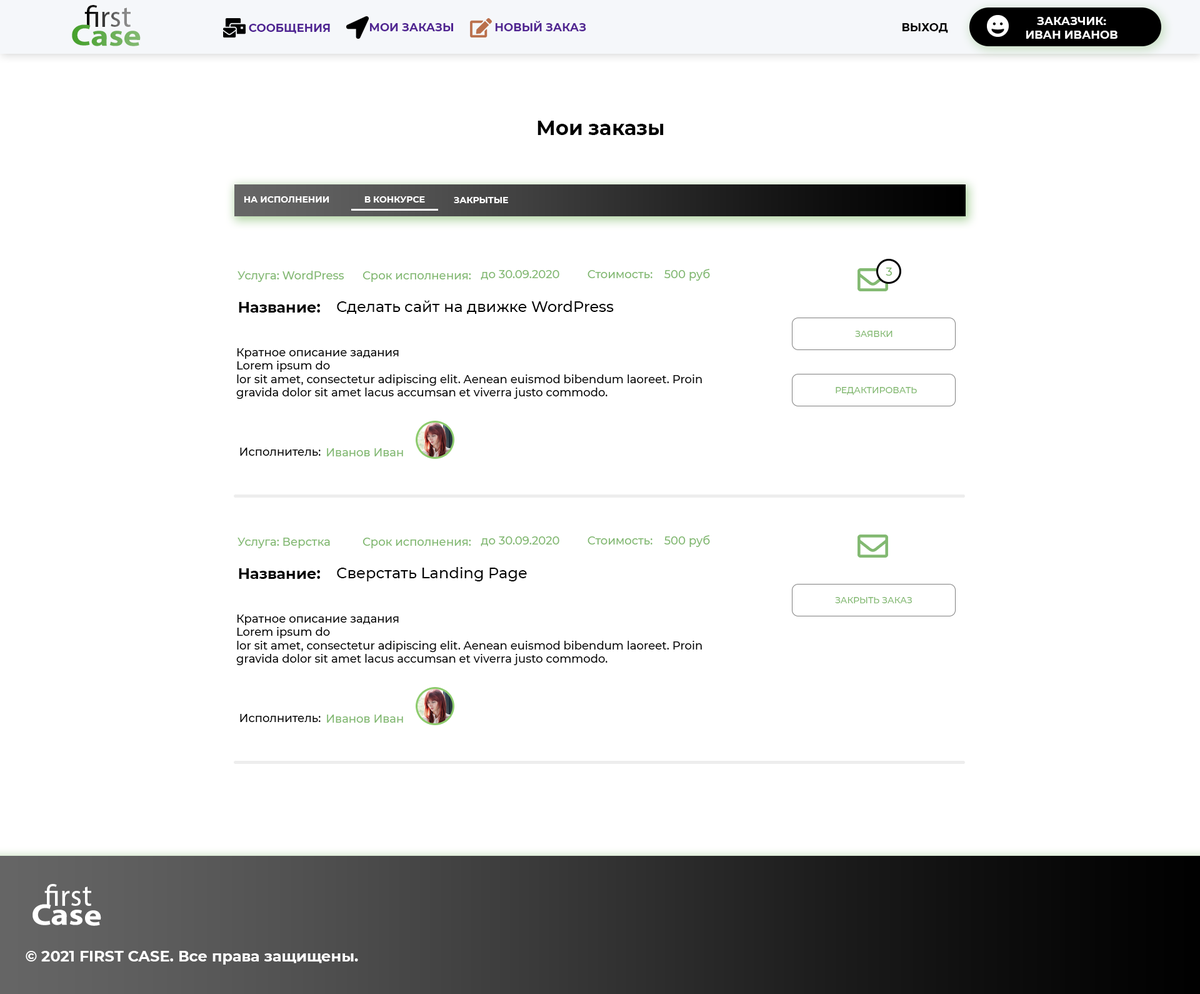
<style>
.page{position:relative;width:1200px;height:994px;background:#ffffff}
.page>*{position:absolute;margin:0}
.t1{font:30px "MyriadPro-Regular"}
.t2{font:11.2px "Montserrat-Bold";color:#ffffff;text-transform:uppercase}
.t3{font:30px "MyriadPro-Bold";scale:1.13 1}
.t4{font:30px "MyriadPro-Regular";scale:1.13 1}
.t5{font:11.2px "Montserrat-Bold";color:#4f2492;text-transform:uppercase}
.t6{font:11.2px "Montserrat-Bold";color:#502492;text-transform:uppercase}
.t7{font:11.2px "Montserrat-Bold";color:#512592;text-transform:uppercase}
.t8{font:11.2px "Montserrat-Bold";color:#000000;text-transform:uppercase}
.t9{font:20px "Montserrat-Bold";color:#000000}
.t10{font:8.7px "Montserrat-Bold";color:#ffffff;text-transform:uppercase}
.t11{font:11.2px "Montserrat-Medium";color:#82b971}
.t12{font:11.2px "Montserrat-Medium";color:#82b970}
.t13{font:15px "Montserrat-Bold";color:#000000}
.t14{font:15px "Montserrat-Medium";color:#000000}
.t15{font:8.7px "Montserrat-Medium";color:#82b970;text-transform:uppercase}
.t16{font:11.2px "Montserrat-Medium";color:#000000}
.t17{font:30px "MyriadPro-Regular";color:#ffffff}
.t18{font:30px "MyriadPro-Bold";color:#ffffff;scale:1.13 1}
.t19{font:30px "MyriadPro-Regular";color:#ffffff;scale:1.13 1}
.t20{font:15px "Montserrat-Bold";color:#ffffff}
</style>
<div class="page">
<p class="t1" style="left:84px;top:5px;width:47px;height:22px">first</p>
<p class="t2" style="left:1026px;top:17px;width:91px;height:22px;text-align:center">заказчик:<br>иВАН иВАНОВ</p>
<p class="t3" style="left:72px;top:24px;width:69px;height:22px;rotate:1deg"><span class="t4">       </span>Case</p>
<p class="t5" style="left:249px;top:24px;width:81px;height:10px">СООБЩЕНИЯ</p>
<p class="t6" style="left:370px;top:23px;width:83px;height:8px">МОИ ЗАКАЗЫ</p>
<p class="t7" style="left:495px;top:21px;width:91px;height:10px">новый заказ</p>
<p class="t8" style="left:902px;top:23px;width:46px;height:10px">ВЫХОД</p>
<p class="t9" style="left:537px;top:121px;width:127px;height:14px">Мои заказы</p>
<p class="t10" style="left:244px;top:196px;width:85px;height:6px">На исполнении</p>
<p class="t10" style="left:364px;top:196px;width:61px;height:6px">В конкурсе</p>
<p class="t10" style="left:454px;top:197px;width:54px;height:6px">Закрытые</p>
<p class="t11" style="left:481px;top:270px;width:78px;height:10px">до 30.09.2020</p>
<p class="t11" style="left:587px;top:270px;width:65px;height:8px">Стоимость:</p>
<p class="t11" style="left:664px;top:269px;width:46px;height:12px">500 руб</p>
<p class="t12" style="left:886px;top:267px;width:6px;height:9px">3</p>
<p class="t11" style="left:237px;top:271px;width:107px;height:11px">Услуга: WordPress</p>
<p class="t11" style="left:362px;top:271px;width:109px;height:11px">Срок исполнения:</p>
<p class="t13" style="left:239px;top:302px;width:81px;height:10px">Название:</p>
<p class="t14" style="left:337px;top:300px;width:277px;height:14px">Сделать сайт на движке WordPress</p>
<p class="t15" style="left:855px;top:331px;width:37px;height:6px">заявки</p>
<p class="t16" style="left:236px;top:348px;width:466px;height:51px">Кратное описание задания<br>Lorem ipsum do<br>lor sit amet, consectetur adipiscing elit. Aenean euismod bibendum laoreet. Proin gravida dolor sit amet lacus accumsan et viverra justo commodo.</p>
<p class="t15" style="left:836px;top:387px;width:81px;height:8px">редактировать</p>
<p class="t16" style="left:240px;top:447px;width:81px;height:9px">Исполнитель:</p>
<p class="t11" style="left:327px;top:448px;width:76px;height:8px">Иванов Иван</p>
<p class="t11" style="left:237px;top:537px;width:93px;height:11px">Услуга: Верстка</p>
<p class="t11" style="left:362px;top:537px;width:109px;height:11px">Срок исполнения:</p>
<p class="t11" style="left:481px;top:536px;width:78px;height:10px">до 30.09.2020</p>
<p class="t11" style="left:587px;top:536px;width:65px;height:8px">Стоимость:</p>
<p class="t11" style="left:664px;top:535px;width:46px;height:12px">500 руб</p>
<p class="t13" style="left:239px;top:568px;width:81px;height:11px">Название:</p>
<p class="t14" style="left:337px;top:567px;width:190px;height:14px">Сверстать Landing Page</p>
<p class="t15" style="left:835px;top:597px;width:77px;height:6px">Закрыть заказ</p>
<p class="t16" style="left:236px;top:614px;width:466px;height:51px">Кратное описание задания<br>Lorem ipsum do<br>lor sit amet, consectetur adipiscing elit. Aenean euismod bibendum laoreet. Proin gravida dolor sit amet lacus accumsan et viverra justo commodo.</p>
<p class="t16" style="left:240px;top:714px;width:81px;height:8px">Исполнитель:</p>
<p class="t11" style="left:327px;top:714px;width:76px;height:8px">Иванов Иван</p>
<p class="t17" style="left:44px;top:884px;width:47px;height:22px">first</p>
<p class="t18" style="left:32px;top:904px;width:69px;height:22px;rotate:1deg"><span class="t19">       </span>Case</p>
<p class="t20" style="left:26px;top:951px;width:332px;height:13px">© 2021 FIRST CASE. Все права защищены.</p>
</div>
